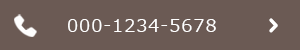
<style>
.page{position:relative;width:300px;height:50px;background:#6b5a54}
.page>*{position:absolute;margin:0}
.t1{font:18px "Meiryo";letter-spacing:0.05em;color:#ffffff}
</style>
<div class="page">
<p class="t1" style="left:68px;top:19px;width:148px;height:13px">000-1234-5678</p>
</div>
